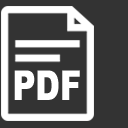
<style>
.page{position:relative;width:128px;height:128px;background:#333333}
.page>*{position:absolute;margin:0}
.t1{font:41.2px "Arial-Black";color:#ffffff;scale:0.77 1}
</style>
<div class="page">
<p class="t1" style="left:14px;top:70px;width:66px;height:30px">PDF</p>
</div>
